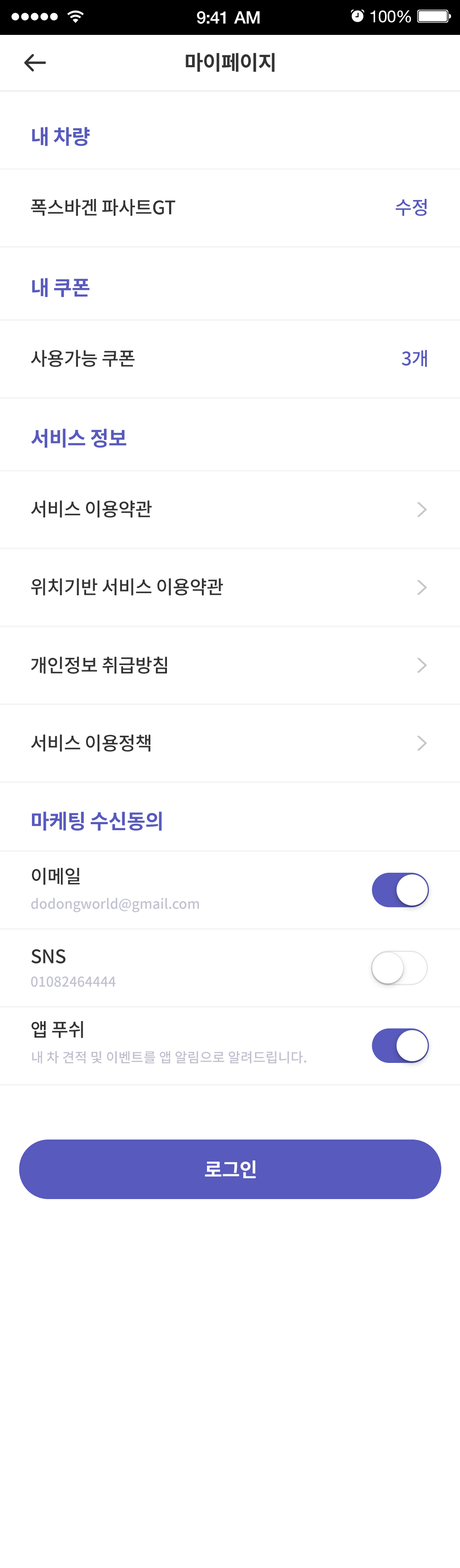
<style>
.page{position:relative;width:460px;height:1568px;background:#ffffff}
.page>*{position:absolute;margin:0}
.t1{font:17.1px "HelveticaNeue-Medium";letter-spacing:-0.02em;color:#ffffff}
.t2{font:16.4px "HelveticaNeue";letter-spacing:-0.02em;color:#ffffff}
.t3{font:20.4px "NotoSansCJKkr-Bold";letter-spacing:-0.02em;color:#333333}
.t4{font:20.4px "NotoSansCJKkr-Bold";letter-spacing:-0.02em;color:#585abd}
.t5{font:18.7px "NotoSansCJKkr-Medium";letter-spacing:-0.02em;color:#333333}
.t6{font:18.7px "NotoSansCJKkr-Medium";letter-spacing:-0.02em;color:#585abd}
.t7{font:13.6px "NotoSansCJKkr-Medium";color:#c1c1cf}
.t8{font:19.6px "NotoSansCJKkr-Bold";letter-spacing:-0.02em;color:#ffffff}
</style>
<div class="page">
<p class="t1" style="left:197px;top:11px;width:63px;height:13px">9:41 AM</p>
<p class="t2" style="left:370px;top:10px;width:41px;height:13px">100%</p>
<p class="t3" style="left:186px;top:53px;width:88px;height:19px">마이페이지</p>
<p class="t4" style="left:32px;top:127px;width:58px;height:19px">내 차량</p>
<p class="t5" style="left:31px;top:199px;width:144px;height:17px">폭스바겐 파사트GT</p>
<p class="t6" style="left:395px;top:199px;width:31px;height:17px">수정</p>
<p class="t4" style="left:32px;top:278px;width:57px;height:19px">내 쿠폰</p>
<p class="t5" style="left:31px;top:350px;width:103px;height:17px">사용가능 쿠폰</p>
<p class="t6" style="left:401px;top:350px;width:26px;height:17px">3개</p>
<p class="t4" style="left:31px;top:428px;width:95px;height:20px">서비스 정보</p>
<p class="t5" style="left:31px;top:500px;width:120px;height:18px">서비스 이용약관</p>
<p class="t5" style="left:31px;top:578px;width:192px;height:18px">위치기반 서비스 이용약관</p>
<p class="t5" style="left:31px;top:657px;width:136px;height:17px">개인정보 취급방침</p>
<p class="t5" style="left:31px;top:734px;width:119px;height:18px">서비스 이용정책</p>
<p class="t4" style="left:32px;top:811px;width:130px;height:20px">마케팅 수신동의</p>
<p class="t5" style="left:32px;top:868px;width:48px;height:17px">이메일</p>
<p class="t7" style="left:31px;top:898px;width:168px;height:14px">dodongworld@gmail.com</p>
<p class="t5" style="left:31px;top:949px;width:35px;height:15px">SNS</p>
<p class="t7" style="left:31px;top:976px;width:85px;height:11px">01082464444</p>
<p class="t5" style="left:31px;top:1021px;width:52px;height:17px">앱 푸쉬</p>
<p class="t7" style="left:32px;top:1051px;width:274px;height:13px">내 차 견적 및 이벤트를 앱 알림으로 알려드립니다.</p>
<p class="t8" style="left:205px;top:1160px;width:51px;height:18px">로그인</p>
</div>
